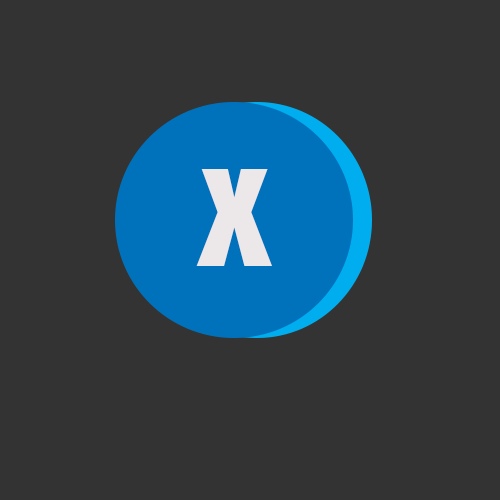
<style>
.page{position:relative;width:500px;height:500px;background:#333333}
.page>*{position:absolute;margin:0}
.t1{font:142.2px "AbadiMT-CondensedExtraBold";letter-spacing:0.038em;color:#ece7e8;scale:1.09 1}
</style>
<div class="page">
<p class="t1" style="left:196px;top:169px;width:76px;height:97px">X</p>
</div>
